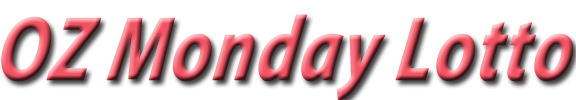
<style>
.page{position:relative;width:576px;height:100px;background:#ffffff}
.page>*{position:absolute;margin:0}
.t1{font:92px "MyriadPro-BoldIt";font-weight:bold;font-style:italic;scale:0.79 1}
</style>
<div class="page">
<p class="t1" style="left:1px;top:14px;width:573px;height:87px">OZ Monday Lotto</p>
</div>
